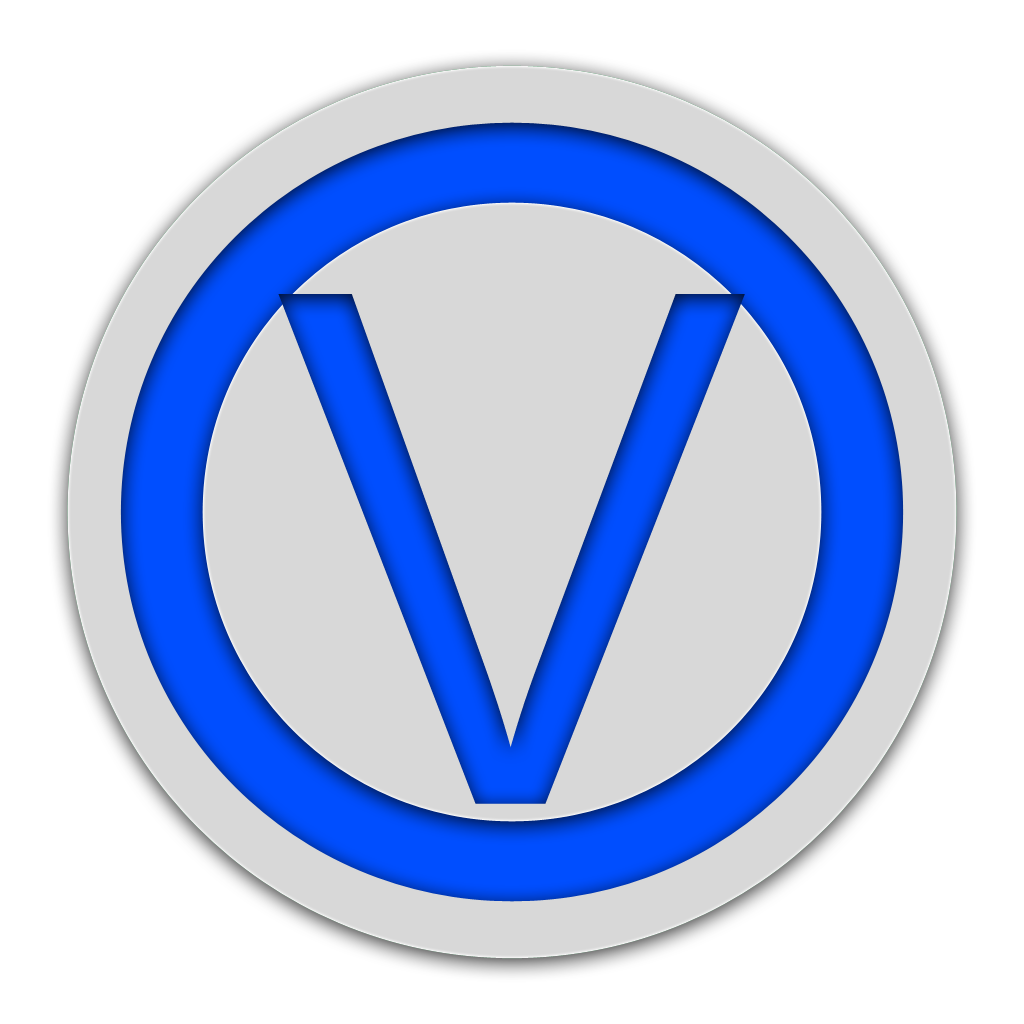
<style>
.page{position:relative;width:1024px;height:1024px;background:#d8d8d8}
.page>*{position:absolute;margin:0}
.t1{font:711.1px "ArialMT"}
</style>
<div class="page">
<p class="t1" style="left:278px;top:294px;width:467px;height:510px">V</p>
</div>
